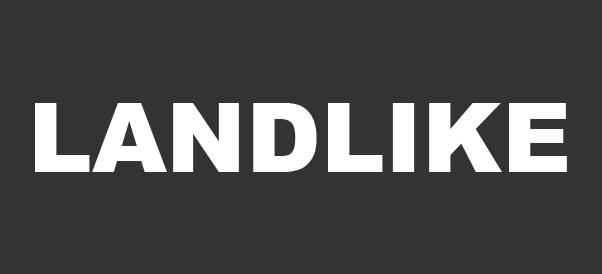
<style>
.page{position:relative;width:602px;height:274px;background:#333333}
.page>*{position:absolute;margin:0}
.t1{font:96px "Arial-Black";color:#ffffff}
</style>
<div class="page">
<p class="t1" style="left:35px;top:103px;width:532px;height:69px">LANDLIKE</p>
</div>
